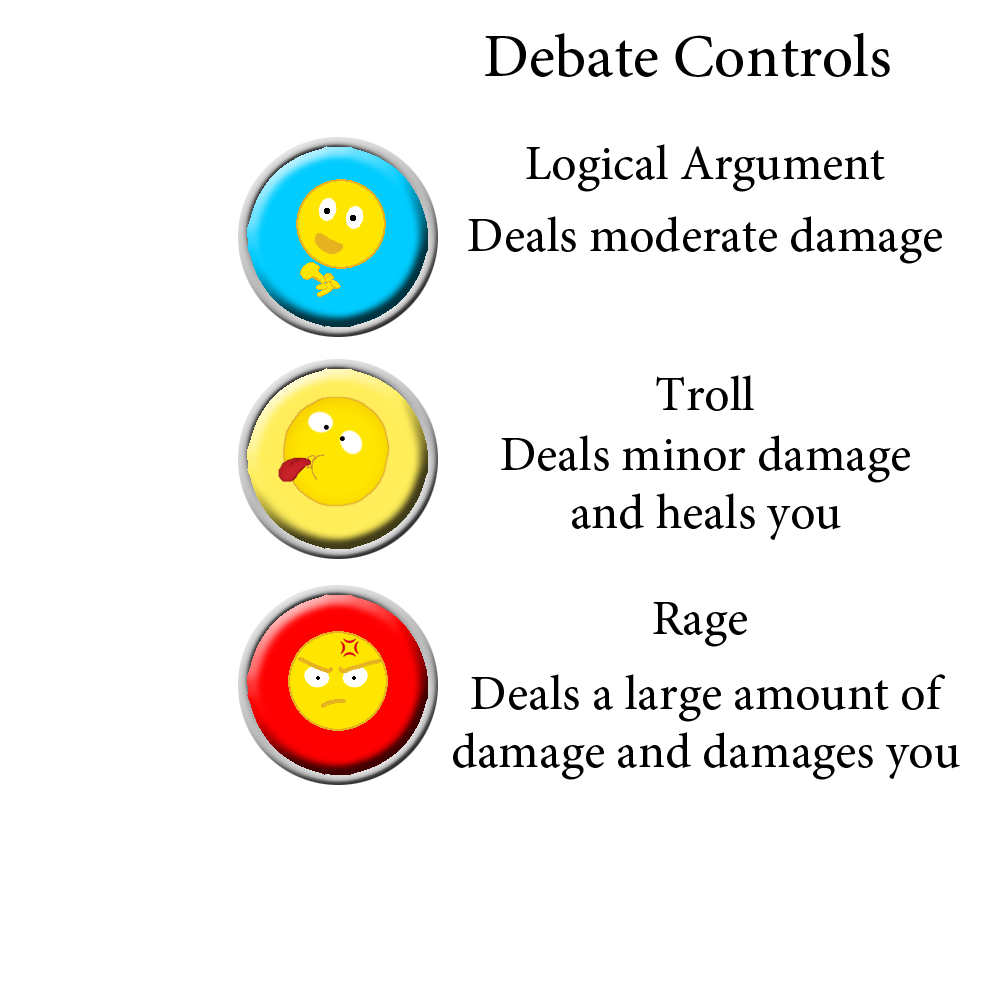
<style>
.page{position:relative;width:1000px;height:1000px;background:#ffffff}
.page>*{position:absolute;margin:0}
.t1{font:60px "AdobeHebrew-Regular";color:#000000}
.t2{font:48px "AdobeHebrew-Regular";color:#000000}
</style>
<div class="page">
<p class="t1" style="left:485px;top:32px;width:405px;height:45px">Debate Controls</p>
<p class="t2" style="left:526px;top:144px;width:359px;height:48px">Logical Argument</p>
<p class="t2" style="left:468px;top:216px;width:474px;height:48px">Deals moderate damage</p>
<p class="t2" style="left:656px;top:375px;width:98px;height:36px">Troll</p>
<p class="t2" style="left:501px;top:435px;width:409px;height:105px;text-align:center">Deals minor damage<br>and heals you</p>
<p class="t2" style="left:653px;top:602px;width:94px;height:45px">Rage</p>
<p class="t2" style="left:453px;top:674px;width:507px;height:106px;text-align:center">Deals a large amount of damage and damages you</p>
</div>
